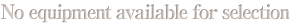
<style>
.page{position:relative;width:292px;height:24px;background:#ffffff}
.page>*{position:absolute;margin:0}
.t1{font:20px "RyuminPro-ExBold";letter-spacing:-0.08em;color:#bdb4ac}
</style>
<div class="page">
<p class="t1" style="left:1px;top:4px;width:289px;height:19px">No equipment available for selection</p>
</div>
